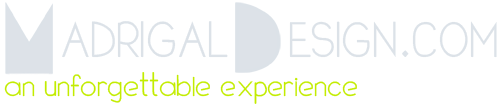
<style>
.page{position:relative;width:503px;height:105px;background:#ffffff}
.page>*{position:absolute;margin:0}
.t1{font:50.8px "ModenoLX";color:#dce2e8}
.t2{font:50px "ModenoLX";color:#dce2e8}
.t3{font:36px "ModenoLX";color:#c2ec00}
</style>
<div class="page">
<p class="t1" style="left:62px;top:21px;width:166px;height:37px">ADRIGAL</p>
<p class="t2" style="left:289px;top:21px;width:208px;height:37px">ESIGN.COM</p>
<p class="t3" style="left:4px;top:72px;width:353px;height:32px">an unforgettable experience</p>
</div>
